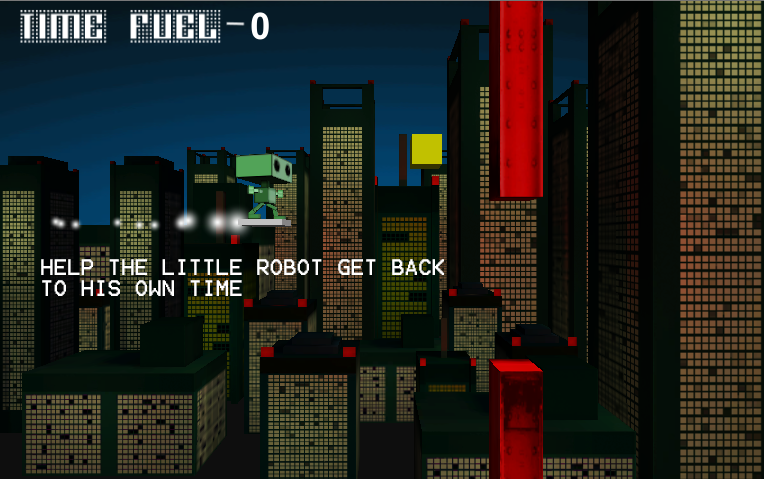
<style>
.page{position:relative;width:764px;height:479px}
.page>*{position:absolute;margin:0}
.t1{font:18px "Terminal";color:#ffffff}
</style>
<div class="page">
<p class="t1" style="left:41px;top:259px;width:403px;height:37px;text-align:right">HELP THE LITTLE ROBOT GET BACK TO HIS OWN TIME</p>
</div>
